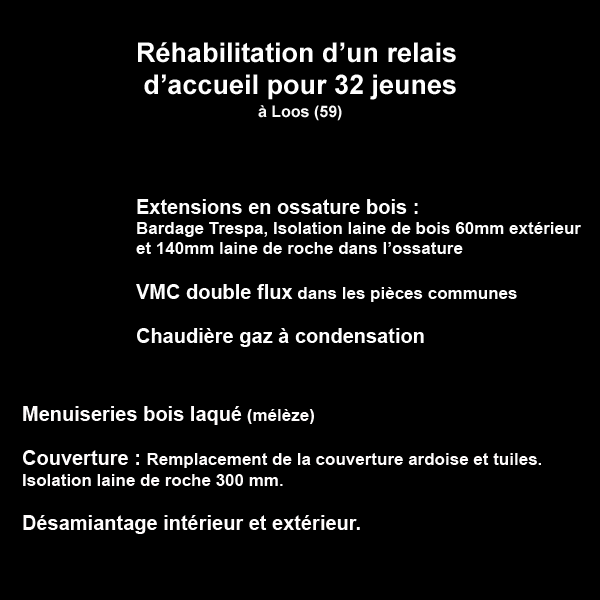
<style>
.page{position:relative;width:600px;height:600px;background:#000000}
.page>*{position:absolute;margin:0}
.t1{font:27px "Arial-BoldMT";color:#fefefe}
.t2{font:16px/22.7px "Arial-BoldMT";color:#f9f9f9}
.t3{font:17px "Arial-BoldMT";color:#fdfdfd}
.t4{font:20px "Arial-BoldMT";color:#fdfdfd}
.t5{font:17px "Arial-BoldMT";color:#fefcfc}
.t6{font:20px "Arial-BoldMT";color:#fefcfc}
</style>
<div class="page">
<p class="t1" style="left:138px;top:42px;width:318px;height:79px;text-align:center">Réhabilitation d’un relais <br>d’accueil pour 32 jeunes<br><span class="t2">à Loos (59)</span></p>
<p class="t3" style="left:136px;top:199px;width:445px;height:148px"><span class="t4">Extensions en ossature bois : <br></span>Bardage Trespa, Isolation laine de bois 60mm extérieur <br>et 140mm laine de roche dans l’ossature<br><br><span class="t4">VMC double flux</span> dans les pièces communes<br><br><span class="t4">Chaudière gaz à condensation</span></p>
<p class="t5" style="left:23px;top:406px;width:518px;height:128px"><span class="t6">Menuiseries bois laqué</span> (mélèze)<br><br><span class="t6">Couverture : </span>Remplacement de la couverture ardoise et tuiles. <br>Isolation laine de roche 300 mm.<br><br><span class="t6">Désamiantage intérieur et extérieur.</span></p>
</div>
